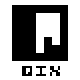
<style>
.page{position:relative;width:80px;height:80px;background:#ffffff}
.page>*{position:absolute;margin:0}
.t1{font:64px "Qix-(large)";color:#000000}
.t2{font:12px "Qix-(small)";color:#000000}
</style>
<div class="page">
<p class="t1" style="left:12px;top:5px;width:56px;height:56px">Q</p>
<p class="t2" style="left:22px;top:66px;width:38px;height:10px">QIX</p>
</div>
